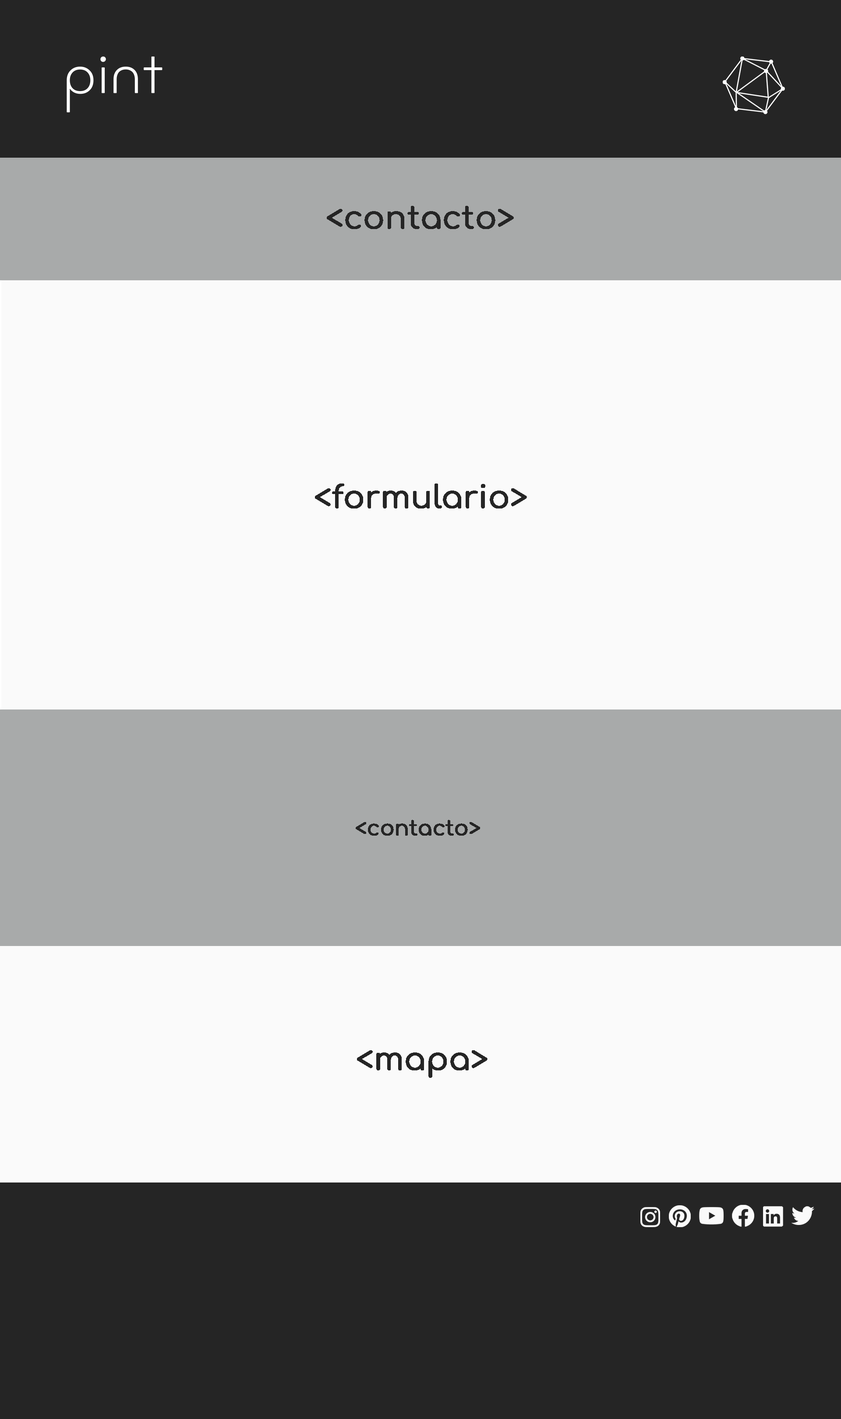
<style>
.page{position:relative;width:841px;height:1419px;background:#fafafa}
.page>*{position:absolute;margin:0}
.t1{font:31.5px "Comfortaa-Medium";letter-spacing:-0.01em;color:#252525;font-weight:bold}
.t2{font:21px "Comfortaa-Medium";letter-spacing:-0.01em;color:#252525;font-weight:bold}
</style>
<div class="page">
<p class="t1" style="left:327px;top:206px;width:187px;height:23px">&lt;contacto&gt;</p>
<p class="t1" style="left:315px;top:483px;width:212px;height:25px">&lt;formulario&gt;</p>
<p class="t2" style="left:356px;top:820px;width:124px;height:15px">&lt;contacto&gt;</p>
<p class="t1" style="left:357px;top:1050px;width:130px;height:27px">&lt;mapa&gt;</p>
</div>
